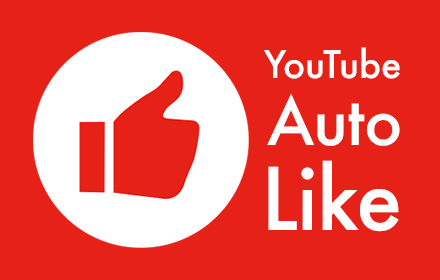
<style>
.page{position:relative;width:440px;height:280px;background:#e62117}
.page>*{position:absolute;margin:0}
.t1{font:37px "Futura-Medium";color:#ffffff}
.t2{font:64px "Futura-Medium";color:#ffffff}
.t3{font:45px "Futura-Medium";color:#ffffff}
.t4{font:84px "Futura-Medium";color:#ffffff}
</style>
<div class="page">
<p class="t1" style="left:264px;top:47px;width:136px;height:32px">YouTube</p>
<p class="t2" style="left:267px;top:93px;width:133px;height:53px"><span class="t3"><br>   </span>Auto</p>
<p class="t4" style="left:268px;top:160px;width:131px;height:72px">Like</p>
</div>
